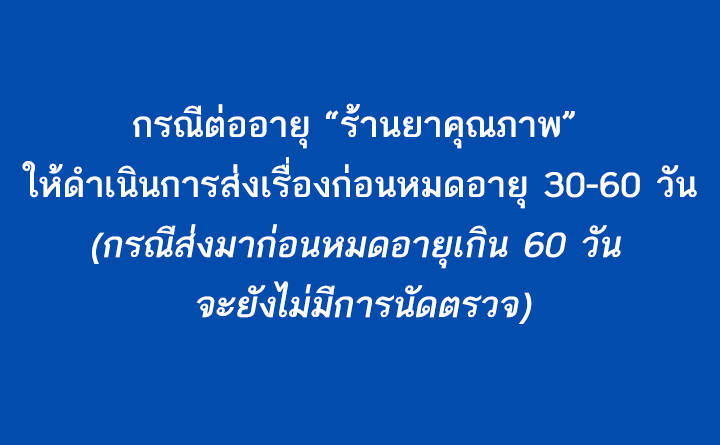
<style>
.page{position:relative;width:720px;height:445px;background:#024cad}
.page>*{position:absolute;margin:0}
.t1{font:50px "THBaijam-Bold";color:#ffffff}
.t2{font:50px "THBaijam-Bold";color:#ffffff;font-style:italic}
</style>
<div class="page">
<p class="t1" style="left:22px;top:103px;width:675px;height:221px;text-align:center">กรณีต่ออายุ “ร้านยาคุณภาพ” <br>ให้ดำเนินการส่งเรื่องก่อนหมดอายุ 30-60 วัน<br><span class="t2">(กรณีส่งมาก่อนหมดอายุเกิน 60 วัน <br>จะยังไม่มีการนัดตรวจ)</span></p>
</div>
